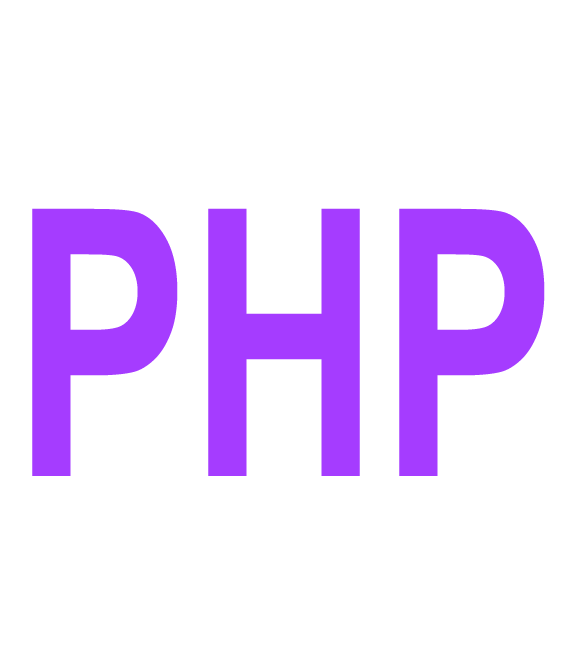
<style>
.page{position:relative;width:564px;height:650px;background:#ffffff}
.page>*{position:absolute;margin:0}
.t1{font:372.7px "Arial-BoldMT";color:#a53cff;scale:0.71 1}
</style>
<div class="page">
<p class="t1" style="left:32px;top:208px;width:513px;height:268px">PHP</p>
</div>
